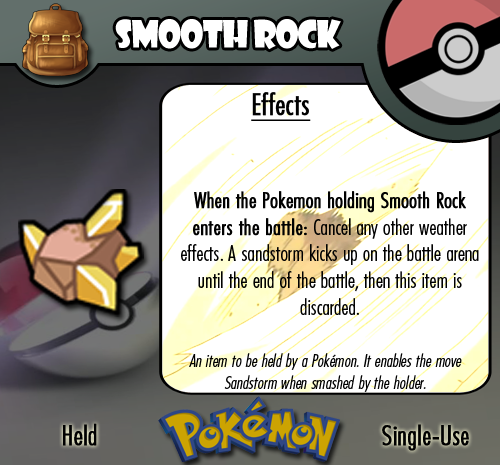
<style>
.page{position:relative;width:500px;height:465px;background:#ffffff}
.page>*{position:absolute;margin:0}
.t1{font:36.7px "ShowcardGothic-Reg";letter-spacing:-0.025em;color:#ffffff;scale:0.91 1}
.t2{font:22.2px "FuturaCondensedBQ-Light";color:#010101}
.t3{font:27.8px "FuturaCondensedBQ-Light";color:#010101;font-weight:bold}
.t4{font:30.6px "FuturaCondensedBQ-Light";color:#010101;font-weight:bold;text-decoration:underline}
.t5{font:22.2px "FuturaCondensedBQ-Light";color:#010101;font-weight:bold}
.t6{font:18.1px "FuturaCondensedBQ-Light";color:#010101;font-style:italic}
</style>
<div class="page">
<p class="t1" style="left:115px;top:19px;width:226px;height:31px">Smooth Rock</p>
<p class="t2" style="left:181px;top:92px;width:298px;height:223px"><span class="t3">  </span><span class="t4">Effects<br><br><br></span><span class="t5">When the Pokemon holding Smooth Rock enters the battle: </span>Cancel any other weather effects. A sandstorm kicks up on the battle arena until the end of the battle, then this item is discarded.</p>
<p class="t6" style="left:189px;top:353px;width:273px;height:39px;text-align:center">An item to be held by a Pokémon. It enables the move Sandstorm when smashed by the holder.</p>
<p class="t3" style="left:63px;top:423px;width:34px;height:23px">Held</p>
<p class="t3" style="left:382px;top:424px;width:87px;height:27px">Single-Use</p>
</div>
